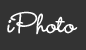
<style>
.page{position:relative;width:86px;height:50px;background:#333333}
.page>*{position:absolute;margin:0}
.t1{font:33.3px "WendyLPStd-Bold";color:#ffffff}
</style>
<div class="page">
<p class="t1" style="left:7px;top:11px;width:71px;height:24px">iPhoto</p>
</div>
